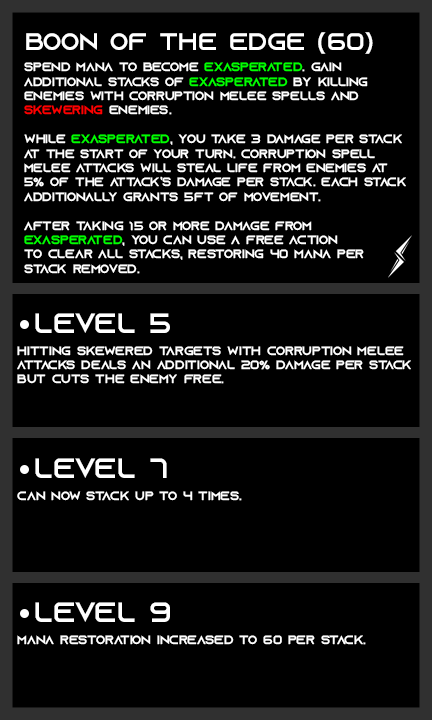
<style>
.page{position:relative;width:432px;height:720px;background:#000000}
.page>*{position:absolute;margin:0}
.t1{font:24px "AzonixRegular";color:#ffffff}
.t2{font:12px "AzonixRegular";color:#ffffff}
.t3{font:12px "AzonixRegular";color:#00ff00}
.t4{font:12px "AzonixRegular";color:#ff0000}
.t5{font:28px "AzonixRegular";color:#ffffff}
</style>
<div class="page">
<p class="t1" style="left:26px;top:32px;width:347px;height:22px">boon of the edge (60)</p>
<p class="t2" style="left:24px;top:62px;width:382px;height:212px">spend mana to become <span class="t3">exasperated</span>. gain <br>additional stacks of <span class="t3">exasperated</span> by killing <br>enemies with corruption melee spells and<br><span class="t4">skewering</span> enemies.<br><br>while <span class="t3">exasperated</span>, you take 3 damage per stack<br>at the start of your turn. corruption spell<br>melee attacks will steal life from enemies at<br>5% of the attack’s damage per stack. each stack<br>additionally grants 5ft of movement.<br><br>after taking 15 or more damage from <br><span class="t3">exasperated</span>, you can use a free action <br>to clear all stacks, restoring 40 mana per<br>stack removed.</p>
<p class="t5" style="left:35px;top:313px;width:135px;height:20px">level 5</p>
<p class="t2" style="left:17px;top:346px;width:394px;height:38px">hitting skewered targets with corruption melee<br>attacks deals an additional 20% damage per stack<br>but cuts the enemy free.</p>
<p class="t5" style="left:35px;top:458px;width:132px;height:20px">level 7</p>
<p class="t2" style="left:17px;top:491px;width:225px;height:10px">can now stack up to 4 times.</p>
<p class="t5" style="left:35px;top:602px;width:135px;height:20px">level 9</p>
<p class="t2" style="left:17px;top:635px;width:349px;height:10px">mana restoration increased to 60 per stack.</p>
</div>
